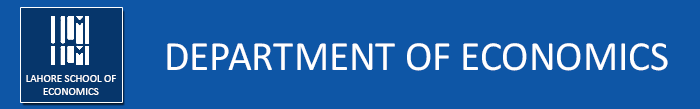
<style>
.page{position:relative;width:700px;height:109px;background:#0e56a6}
.page>*{position:absolute;margin:0}
.t1{font:41.9px "Calibri";color:#ffffff}
.t2{font:11px "Calibri";color:#ffffff}
</style>
<div class="page">
<p class="t1" style="left:167px;top:43px;width:501px;height:28px">DEPARTMENT OF ECONOMICS</p>
<p class="t2" style="left:26px;top:75px;width:90px;height:20px;text-align:center">LAHORE SCHOOL OF<br>ECONOMICS</p>
<p class="t2" style="left:26px;top:75px;width:90px;height:20px;text-align:center">LAHORE SCHOOL OF<br>ECONOMICS</p>
</div>
